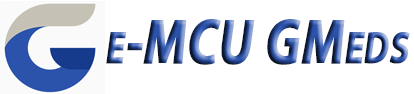
<style>
.page{position:relative;width:414px;height:94px;background:#ffffff}
.page>*{position:absolute;margin:0}
.t1{font:64.4px "MyriadPro-Bold";font-variant:small-caps;font-weight:bold;font-style:italic;scale:0.78 1}
</style>
<div class="page">
<p class="t1" style="left:106px;top:19px;width:304px;height:46px">e-MCU GMeds</p>
</div>
